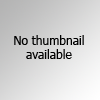
<style>
.page{position:relative;width:100px;height:100px}
.page>*{position:absolute;margin:0}
.t1{font:12px "Tahoma";color:#000000}
</style>
<div class="page">
<p class="t1" style="left:14px;top:35px;width:70px;height:24px;text-align:center">No thumbnail<br>available</p>
</div>
